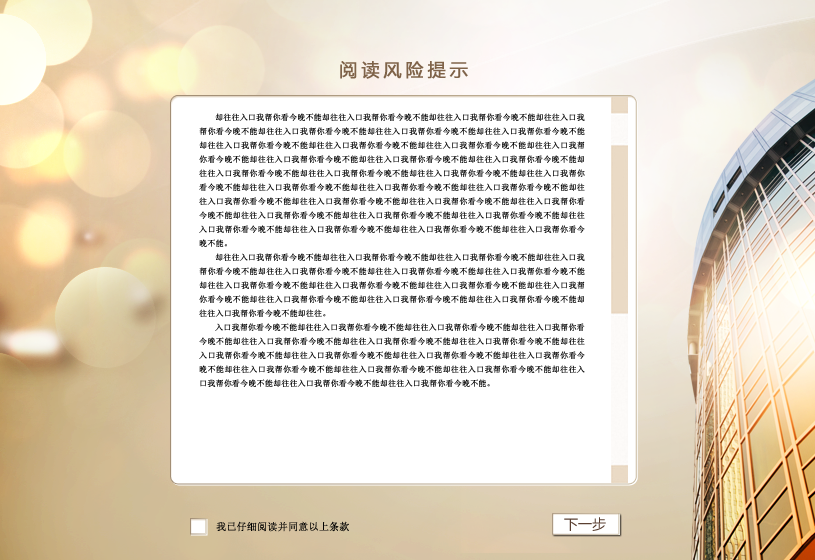
<style>
.page{position:relative;width:815px;height:560px;background:#ffffff}
.page>*{position:absolute;margin:0}
.t1{font:18px "MicrosoftYaHei";letter-spacing:0.2em;color:#7f6349;font-weight:bold}
.t2{font:8px "SimSun";color:#000000;font-weight:bold}
.t3{font:10px "SimSun";color:#000000;font-weight:bold}
.t4{font:14px "MicrosoftYaHei";color:#5a3f31}
</style>
<div class="page">
<p class="t1" style="left:340px;top:61px;width:128px;height:18px">阅读风险提示</p>
<p class="t2" style="left:199px;top:113px;width:386px;height:274px;text-align:justify">却往往入口我帮你看今晚不能却往往入口我帮你看今晚不能却往往入口我帮你看今晚不能却往往入口我帮你看今晚不能却往往入口我帮你看今晚不能却往往入口我帮你看今晚不能却往往入口我帮你看今晚不能却往往入口我帮你看今晚不能却往往入口我帮你看今晚不能却往往入口我帮你看今晚不能却往往入口我帮你看今晚不能却往往入口我帮你看今晚不能却往往入口我帮你看今晚不能却往往入口我帮你看今晚不能却往往入口我帮你看今晚不能却往往入口我帮你看今晚不能却往往入口我帮你看今晚不能却往往入口我帮你看今晚不能却往往入口我帮你看今晚不能却往往入口我帮你看今晚不能却往往入口我帮你看今晚不能却往往入口我帮你看今晚不能却往往入口我帮你看今晚不能却往往入口我帮你看今晚不能却往往入口我帮你看今晚不能却往往入口我帮你看今晚不能却往往入口我帮你看今晚不能却往往入口我帮你看今晚不能却往往入口我帮你看今晚不能却往往入口我帮你看今晚不能却往往入口我帮你看今晚不能却往往入口我帮你看今晚不能。<br>却往往入口我帮你看今晚不能却往往入口我帮你看今晚不能却往往入口我帮你看今晚不能却往往入口我帮你看今晚不能却往往入口我帮你看今晚不能却往往入口我帮你看今晚不能却往往入口我帮你看今晚不能却往往入口我帮你看今晚不能却往往入口我帮你看今晚不能却往往入口我帮你看今晚不能却往往入口我帮你看今晚不能却往往入口我帮你看今晚不能却往往入口我帮你看今晚不能却往往入口我帮你看今晚不能却往往入口我帮你看今晚不能却往往。<br>入口我帮你看今晚不能却往往入口我帮你看今晚不能却往往入口我帮你看今晚不能却往往入口我帮你看今晚不能却往往入口我帮你看今晚不能却往往入口我帮你看今晚不能却往往入口我帮你看今晚不能却往往入口我帮你看今晚不能却往往入口我帮你看今晚不能却往往入口我帮你看今晚不能却往往入口我帮你看今晚不能却往往入口我帮你看今晚不能却往往入口我帮你看今晚不能却往往入口我帮你看今晚不能却往往入口我帮你看今晚不能却往往入口我帮你看今晚不能却往往入口我帮你看今晚不能。</p>
<p class="t3" style="left:216px;top:521px;width:133px;height:11px">我已仔细阅读并同意以上条款</p>
<p class="t4" style="left:564px;top:517px;width:42px;height:14px">下一步</p>
</div>
